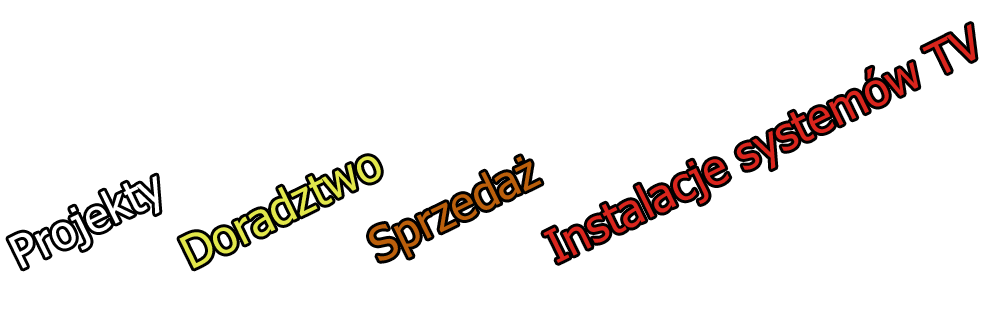
<style>
.page{position:relative;width:1000px;height:315px;background:#ffffff}
.page>*{position:absolute;margin:0}
.t1{font:45.8px "Tahoma";color:#da251d}
.t2{font:45.8px "Tahoma";color:#e2e74b}
.t3{font:45.8px "Tahoma";color:#bb5f0b}
</style>
<div class="page">
<p class="t1" style="left:543px;top:24px;width:433px;height:239px;rotate:-26deg">Instalacje systemów TV</p>
<p class="t2" style="left:179px;top:156px;width:202px;height:113px;rotate:-26deg">Doradztwo</p>
<p class="t3" style="left:369px;top:156px;width:173px;height:105px;rotate:-26deg">Sprzedaż</p>
</div>
